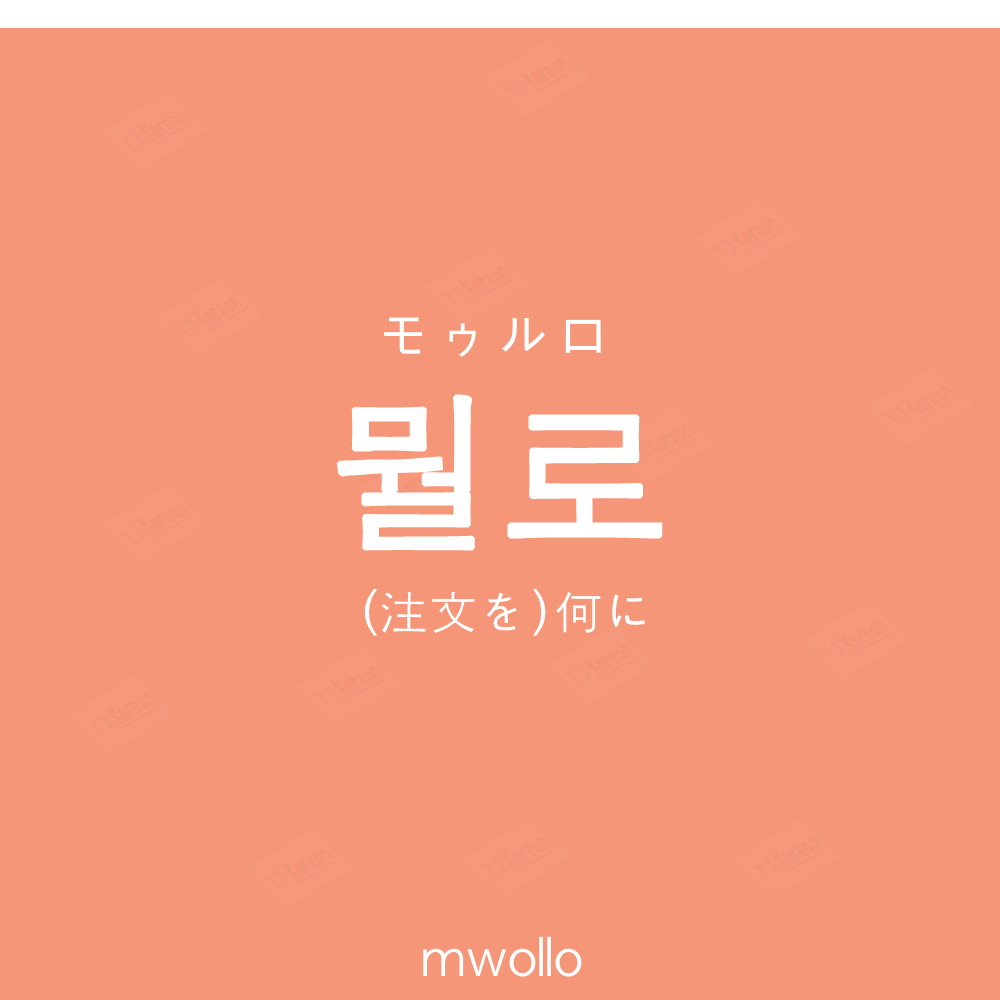
<style>
.page{position:relative;width:1000px;height:1000px;background:#f69679}
.page>*{position:absolute;margin:0}
.t1{font:60px "AppleGothic";color:#ffffff;text-transform:uppercase}
.t2{font:170px "AppleGothic";color:#ffffff;font-weight:bold}
.t3{font:50px "AppleGothic";color:#ffffff}
</style>
<div class="page">
<p class="t1" style="left:384px;top:317px;width:217px;height:40px">モゥルロ</p>
<p class="t2" style="left:336px;top:394px;width:327px;height:157px">뭘로</p>
<p class="t3" style="left:364px;top:588px;width:281px;height:48px">（注文を)何に</p>
<p class="t3" style="left:423px;top:936px;width:159px;height:41px">mwollo</p>
</div>
